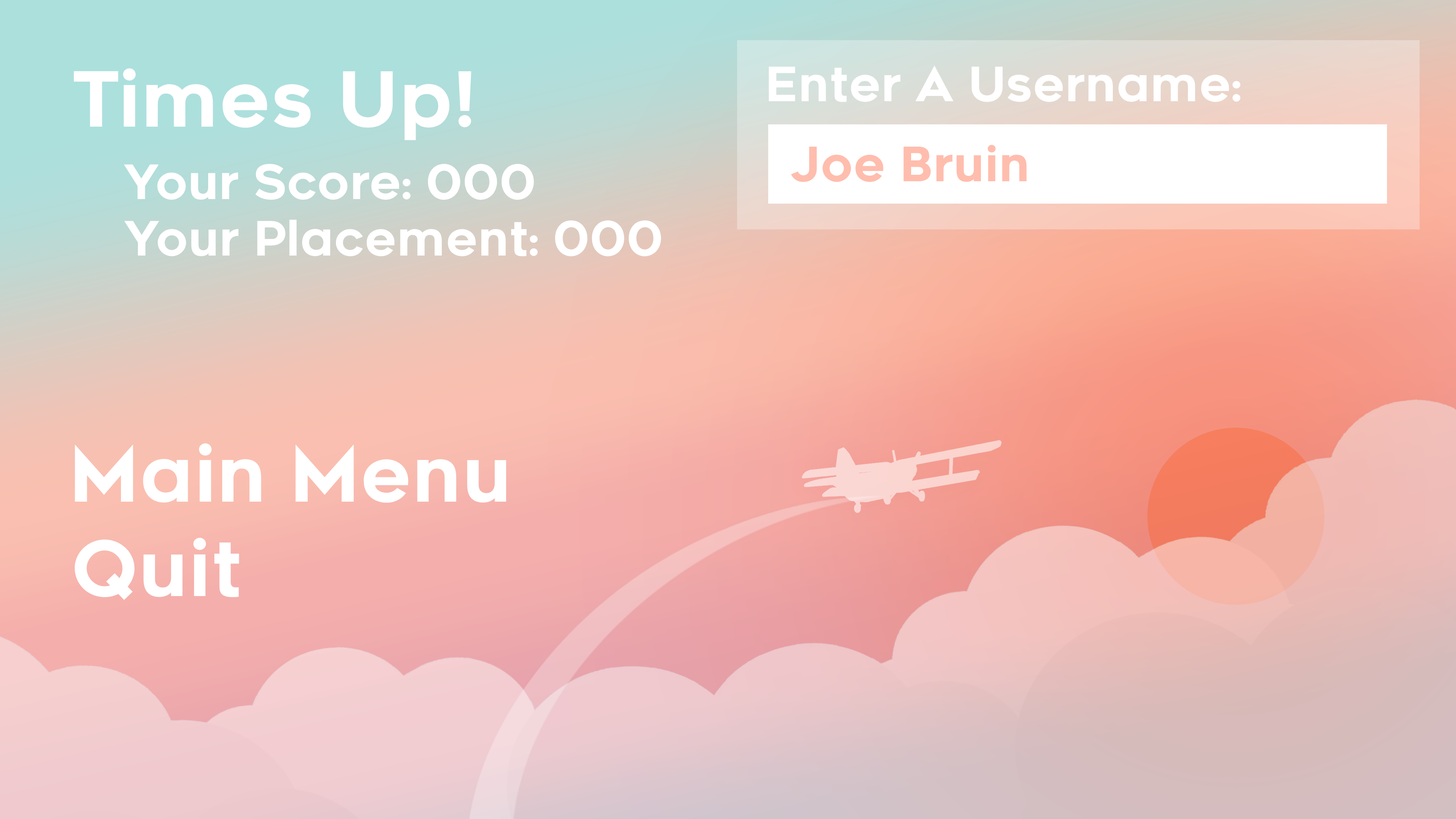
<style>
.page{position:relative;width:1456px;height:819px}
.page>*{position:absolute;margin:0}
.t1{font:47.4px "Renogare-Regular";color:#ffffff}
.t2{font:75.8px "Renogare-Regular";color:#ffffff}
.t3{font:47.4px "Renogare-Regular";color:#ffbdad}
</style>
<div class="page">
<p class="t1" style="left:769px;top:65px;width:472px;height:37px">Enter A Username:</p>
<p class="t2" style="left:74px;top:68px;width:397px;height:72px">Times Up!</p>
<p class="t3" style="left:791px;top:144px;width:236px;height:38px">Joe Bruin</p>
<p class="t1" style="left:124px;top:164px;width:410px;height:36px">Your Score: 000</p>
<p class="t1" style="left:124px;top:220px;width:537px;height:36px">Your Placement: 000</p>
<p class="t2" style="left:75px;top:443px;width:431px;height:60px">Main Menu</p>
<p class="t2" style="left:75px;top:538px;width:164px;height:62px">Quit</p>
</div>
